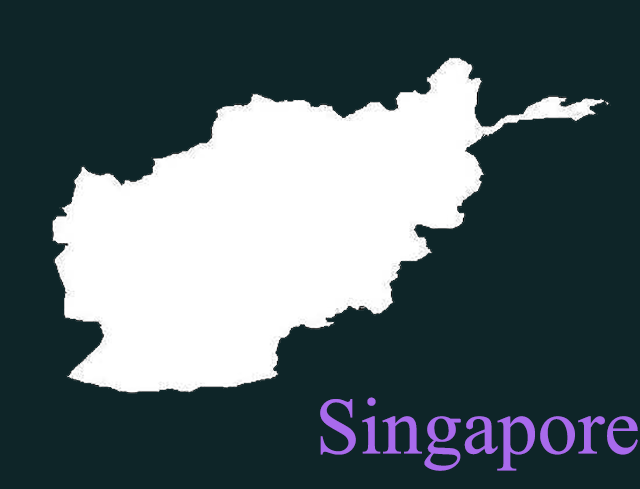
<style>
.page{position:relative;width:640px;height:489px;background:#0e2528}
.page>*{position:absolute;margin:0}
.t1{font:80px "TimesNewRomanPSMT";color:#a86aec}
</style>
<div class="page">
<p class="t1" style="left:320px;top:397px;width:318px;height:74px">Singapore</p>
</div>
